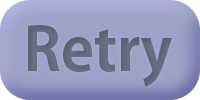
<style>
.page{position:relative;width:200px;height:100px}
.page>*{position:absolute;margin:0}
.t1{font:60px "AdobeGothicStd-Bold";color:#6b6d83}
</style>
<div class="page">
<p class="t1" style="left:28px;top:25px;width:144px;height:62px">Retry</p>
</div>
